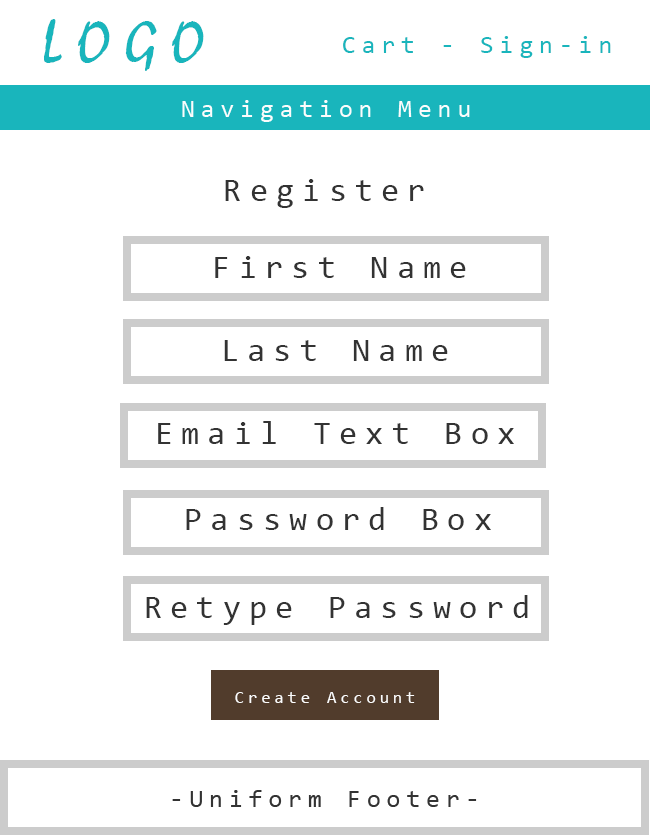
<style>
.page{position:relative;width:650px;height:835px;background:#ffffff}
.page>*{position:absolute;margin:0}
.t1{font:62.5px "Mistral";letter-spacing:0.24em;color:#19b5bc}
.t2{font:25px "Consolas";letter-spacing:0.24em;color:#19b5bc}
.t3{font:33.3px "Consolas";letter-spacing:0.24em;color:#333333}
.t4{font:16.7px "Consolas";letter-spacing:0.24em;color:#fcfcfc}
</style>
<div class="page">
<p class="t1" style="left:44px;top:19px;width:160px;height:52px">LOGO</p>
<p class="t2" style="left:343px;top:36px;width:268px;height:22px">Cart - Sign-in</p>
<p class="t3" style="left:225px;top:179px;width:199px;height:29px">Register</p>
<p class="t3" style="left:215px;top:256px;width:251px;height:22px">First Name</p>
<p class="t3" style="left:224px;top:340px;width:224px;height:21px">Last Name</p>
<p class="t3" style="left:158px;top:421px;width:356px;height:23px">Email Text Box</p>
<p class="t3" style="left:186px;top:507px;width:305px;height:23px">Password Box</p>
<p class="t3" style="left:146px;top:595px;width:382px;height:30px">Retype Password</p>
<p class="t4" style="left:235px;top:692px;width:180px;height:11px">Create Account</p>
</div>
